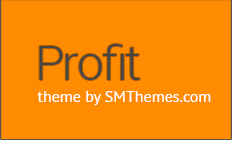
<style>
.page{position:relative;width:232px;height:143px;background:#ff8c00}
.page>*{position:absolute;margin:0}
.t1{font:47.8px "Roboto-Light";letter-spacing:-0.04em;color:#454545}
.t2{font:16px "PTSans-Regular";color:#ffffff}
</style>
<div class="page">
<p class="t1" style="left:39px;top:44px;width:101px;height:36px">Profit</p>
<p class="t2" style="left:37px;top:91px;width:174px;height:14px">theme by SMThemes.com</p>
</div>
